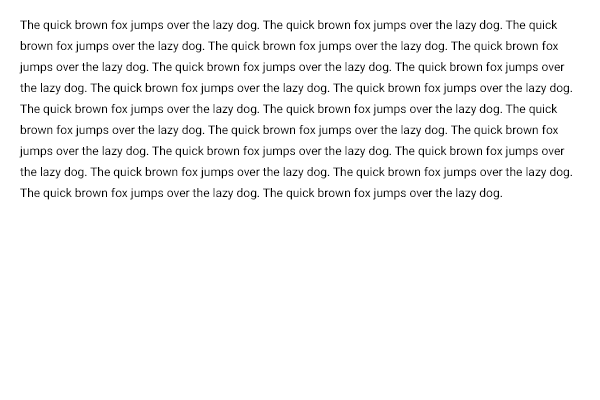
<style>
.page{position:relative;width:600px;height:400px;background:#ffffff}
.page>*{position:absolute;margin:0}
.t1{font:12px "Roboto-Regular";color:#000000}
</style>
<div class="page">
<p class="t1" style="left:19px;top:20px;width:553px;height:180px">The quick brown fox jumps over the lazy dog. The quick brown fox jumps over the lazy dog. The quick brown fox jumps over the lazy dog. The quick brown fox jumps over the lazy dog. The quick brown fox jumps over the lazy dog. The quick brown fox jumps over the lazy dog. The quick brown fox jumps over the lazy dog. The quick brown fox jumps over the lazy dog. The quick brown fox jumps over the lazy dog. The quick brown fox jumps over the lazy dog. The quick brown fox jumps over the lazy dog. The quick brown fox jumps over the lazy dog. The quick brown fox jumps over the lazy dog. The quick brown fox jumps over the lazy dog. The quick brown fox jumps over the lazy dog. The quick brown fox jumps over the lazy dog. The quick brown fox jumps over the lazy dog. The quick brown fox jumps over the lazy dog. The quick brown fox jumps over the lazy dog. The quick brown fox jumps over the lazy dog.</p>
</div>
